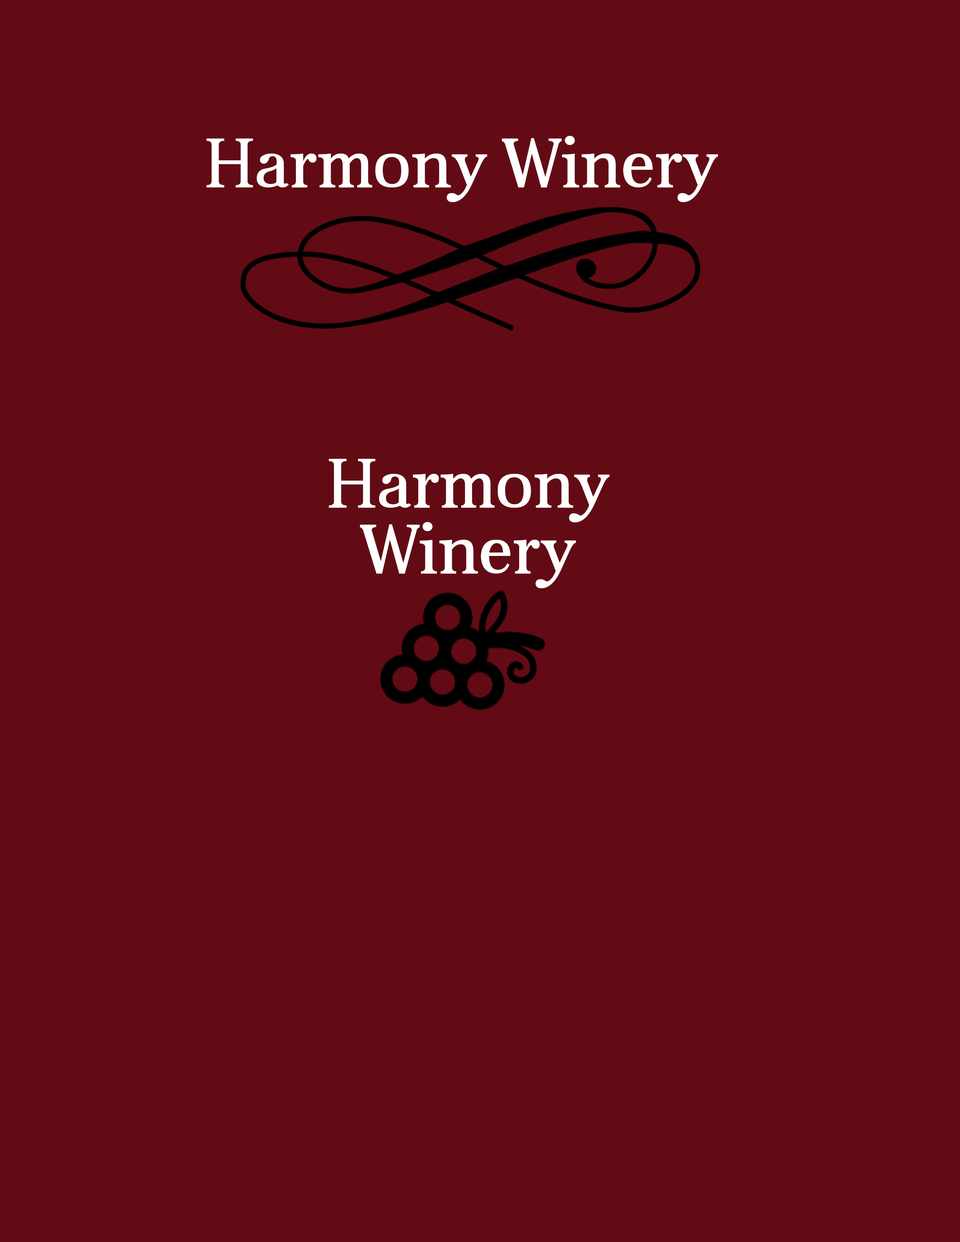
<style>
.page{position:relative;width:960px;height:1242px;background:#630b15}
.page>*{position:absolute;margin:0}
.t1{font:70.6px "Aver";color:#ffffff}
.t2{font:70.6px/65.9px "Aver";color:#ffffff}
</style>
<div class="page">
<p class="t1" style="left:206px;top:136px;width:512px;height:66px">Harmony Winery</p>
<p class="t2" style="left:329px;top:459px;width:280px;height:129px;text-align:center">Harmony<br>Winery</p>
</div>
